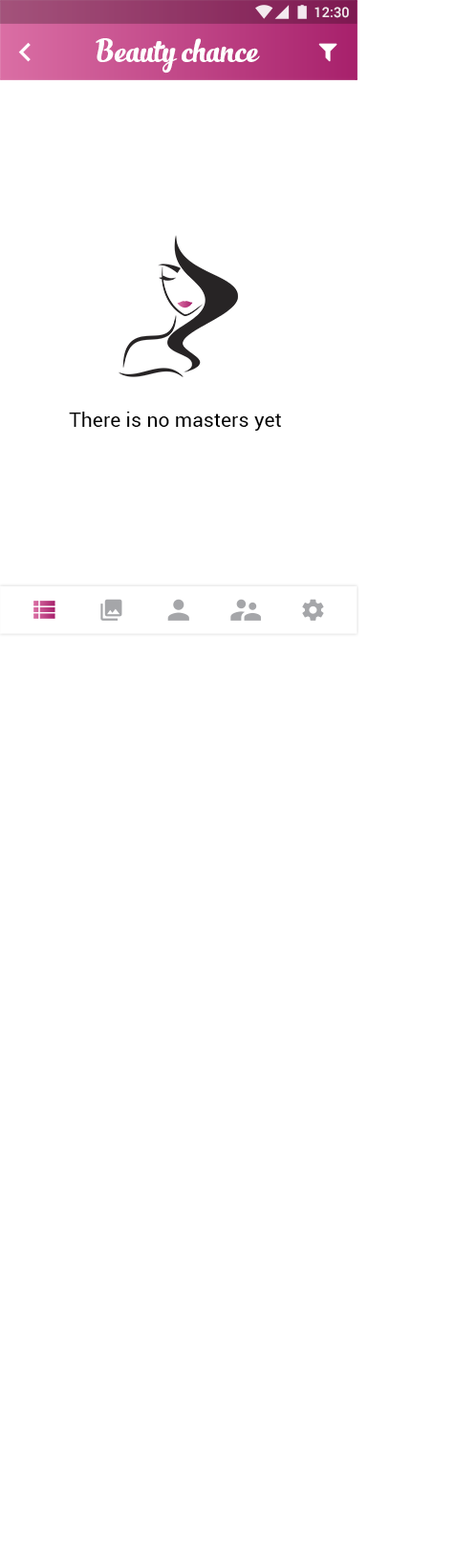
<style>
.page{position:relative;width:455px;height:1568px;background:#ffffff}
.page>*{position:absolute;margin:0}
.t1{font:13.9px "Roboto-Medium";color:#ffffff}
.t2{font:23.8px "SlimTony-Italic";color:#ffffff}
.t3{font:19.8px "Roboto-Regular";letter-spacing:0.01em;color:#000000}
</style>
<div class="page">
<p class="t1" style="left:314px;top:7px;width:35px;height:11px">12:30</p>
<p class="t2" style="left:95px;top:38px;width:165px;height:36px">Beauty chance</p>
<p class="t3" style="left:69px;top:412px;width:212px;height:19px">There is no masters yet</p>
</div>
